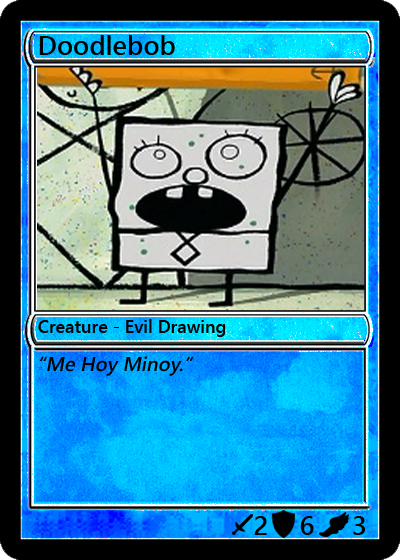
<style>
.page{position:relative;width:400px;height:560px}
.page>*{position:absolute;margin:0}
.t1{font:27px "YuGothicUI-Semibold";color:#000000}
.t2{font:18px "YuGothicUI-Semibold";color:#030303}
.t3{font:20px "YuGothicUI-Semibold";color:#000000;font-style:italic}
</style>
<div class="page">
<p class="t1" style="left:39px;top:35px;width:136px;height:20px">Doodlebob</p>
<p class="t2" style="left:38px;top:319px;width:188px;height:18px">Creature - Evil Drawing</p>
<p class="t3" style="left:39px;top:356px;width:155px;height:20px">“Me Hoy Minoy.”</p>
<p class="t1" style="left:254px;top:516px;width:13px;height:19px">2</p>
<p class="t1" style="left:300px;top:516px;width:14px;height:19px">6</p>
<p class="t1" style="left:353px;top:516px;width:12px;height:19px">3</p>
</div>
